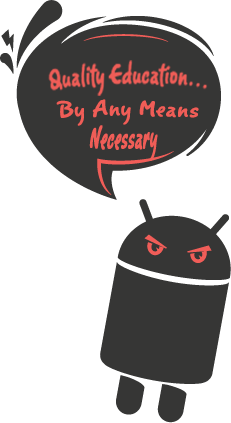
<style>
.page{position:relative;width:231px;height:423px;background:#ffffff}
.page>*{position:absolute;margin:0}
.t1{font:26.7px "Romy";color:#f05d57;font-weight:bold;scale:1.17 1}
</style>
<div class="page">
<p class="t1" style="left:56px;top:99px;width:143px;height:27px">By Any Means Necessary.</p>
</div>
